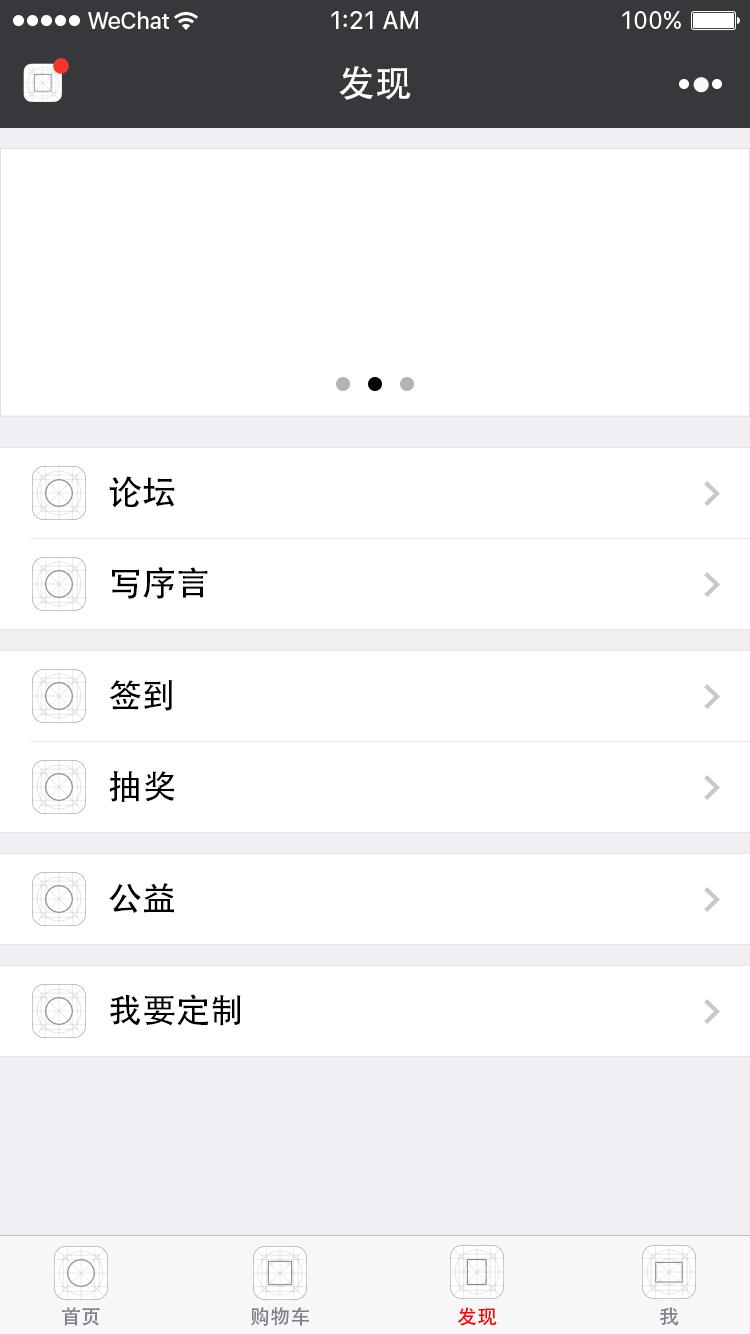
<style>
.page{position:relative;width:750px;height:1334px;background:#ffffff}
.page>*{position:absolute;margin:0}
.t1{font:37px "AdobeHeitiStd-Regular";color:#ffffff}
.t2{font:34px "AdobeHeitiStd-Regular";color:#000000}
.t3{font:20px "AdobeHeitiStd-Regular";color:#7f8389}
.t4{font:20px "AdobeHeitiStd-Regular";color:#ff0000}
</style>
<div class="page">
<p class="t1" style="left:339px;top:66px;width:72px;height:34px">发现</p>
<p class="t2" style="left:109px;top:476px;width:66px;height:32px">论坛</p>
<p class="t2" style="left:112px;top:567px;width:96px;height:32px">写序言</p>
<p class="t2" style="left:109px;top:680px;width:64px;height:31px">签到</p>
<p class="t2" style="left:109px;top:771px;width:66px;height:31px">抽奖</p>
<p class="t2" style="left:109px;top:883px;width:65px;height:30px">公益</p>
<p class="t2" style="left:110px;top:994px;width:131px;height:32px">我要定制</p>
<p class="t3" style="left:62px;top:1307px;width:38px;height:19px">首页</p>
<p class="t3" style="left:251px;top:1307px;width:58px;height:19px">购物车</p>
<p class="t4" style="left:457px;top:1307px;width:40px;height:19px">发现</p>
<p class="t3" style="left:660px;top:1307px;width:19px;height:19px">我</p>
</div>
